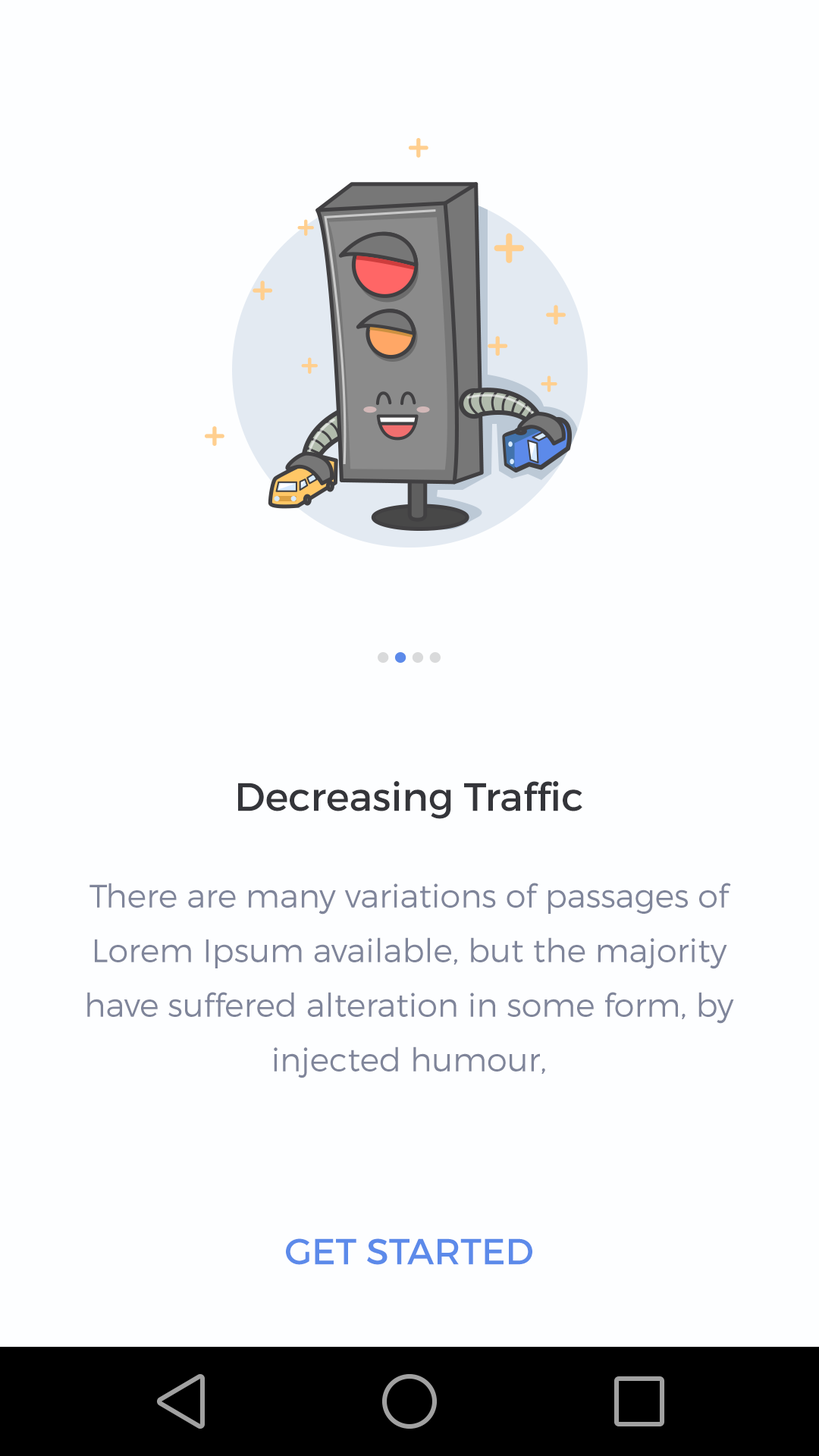
<style>
.page{position:relative;width:819px;height:1456px;background:#fdfeff}
.page>*{position:absolute;margin:0}
.t1{font:39.4px "Montserrat-Regular";color:#34353a}
.t2{font:32.6px/54.6px "Montserrat-Light";color:#7f8599}
.t3{font:36.4px "Montserrat-Regular";color:#5c8aea}
</style>
<div class="page">
<p class="t1" style="left:238px;top:781px;width:344px;height:38px">Decreasing Traffic</p>
<p class="t2" style="left:87px;top:883px;width:647px;height:195px;text-align:center">There are many variations of passages of Lorem Ipsum available, but the majority have suffered alteration in some form, by injected humour,</p>
<p class="t3" style="left:286px;top:1238px;width:246px;height:27px">GET STARTED</p>
</div>
